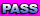
<style>
.page{position:relative;width:40px;height:16px;background:#ff00ff}
.page>*{position:absolute;margin:0}
.t1{font:11.9px "Arial-Black";scale:1.05 1}
</style>
<div class="page">
<p class="t1" style="left:2px;top:4px;width:36px;height:9px">PASS</p>
</div>
